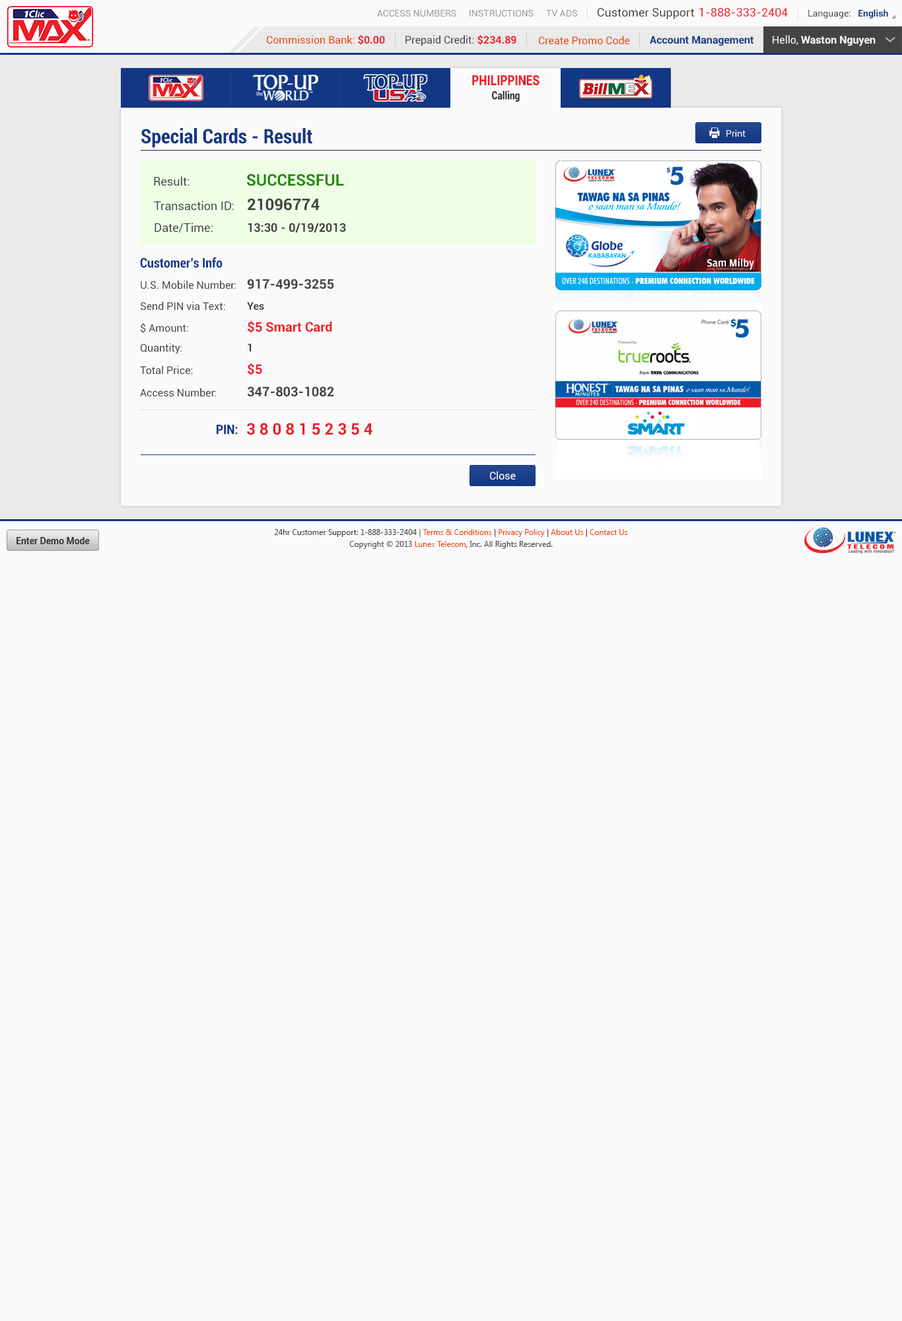
<style>
.page{position:relative;width:902px;height:1321px;background:#fafafa}
.page>*{position:absolute;margin:0}
.t1{font:9.2px "Roboto-Regular";color:#999999}
.t2{font:11.6px "Roboto-Regular";color:#444444}
.t3{font:11.6px "Roboto-Regular";color:#ec2029}
.t4{font:9.2px "Roboto-Regular";color:#444444}
.t5{font:9.2px "Roboto-Bold";color:#123785}
.t6{font:10.6px "Roboto-Regular";color:#ee4400}
.t7{font:10.6px "Roboto-Bold";color:#ec2028}
.t8{font:10.6px "Roboto-Regular";color:#444444}
.t9{font:10.6px "Roboto-Bold";color:#123785}
.t10{font:10.6px "Roboto-Bold";color:#fafafa}
.t11{font:10.6px "Roboto-Regular";color:#fafafa}
.t12{font:14.1px "Roboto-Black";color:#ec2028;scale:0.81 1}
.t13{font:11.3px "Roboto-Black";color:#333333;scale:0.81 1}
.t14{font:19.8px "Roboto-BoldCondensed";color:#123785}
.t15{font:9.2px "Roboto-Regular";color:#fafafa}
.t16{font:15.9px "Roboto-Bold";color:#228800}
.t17{font:11.9px "Roboto-Regular";color:#444444}
.t18{font:15.9px "Roboto-Bold";color:#444444}
.t19{font:11.9px "Roboto-Bold";color:#444444}
.t20{font:13.2px "Roboto-BoldCondensed";color:#123785}
.t21{font:13.2px "Roboto-Bold";color:#444444}
.t22{font:10.6px "Roboto-Bold";color:#444444}
.t23{font:13.2px "Roboto-Bold";color:#ec2028}
.t24{font:15.9px "Roboto-Bold";color:#eb1e27}
.t25{font:10.6px "Roboto-Regular";color:#ffffff}
.t26{font:7.9px/11.9px "SegoeUI";color:#444444}
.t27{font:7.9px/11.9px "SegoeUI";color:#ee4400}
.t28{font:7.9px/11.9px "SegoeUI";color:#333333}
.t29{font:9.2px "Roboto-Bold";color:#333333}
</style>
<div class="page">
<p class="t1" style="left:377px;top:10px;width:80px;height:7px">ACCESS NUMBERS</p>
<p class="t1" style="left:470px;top:10px;width:64px;height:7px">INSTRUCTIONS</p>
<p class="t1" style="left:546px;top:10px;width:31px;height:7px">TV ADS</p>
<p class="t2" style="left:598px;top:8px;width:96px;height:11px">Customer Support</p>
<p class="t3" style="left:700px;top:8px;width:88px;height:9px">1-888-333-2404</p>
<p class="t4" style="left:809px;top:9px;width:80px;height:9px">Language:   <span class="t5">English</span></p>
<p class="t6" style="left:267px;top:35px;width:118px;height:10px">Commission Bank: <span class="t7">$0.00</span></p>
<p class="t8" style="left:406px;top:35px;width:111px;height:11px">Prepaid Credit: <span class="t7">$234.89</span></p>
<p class="t6" style="left:539px;top:36px;width:91px;height:9px">Create Promo Code</p>
<p class="t9" style="left:650px;top:36px;width:104px;height:10px">Account Management</p>
<p class="t10" style="left:773px;top:35px;width:103px;height:11px"><span class="t11">Hello, </span>Waston Nguyen</p>
<p class="t12" style="left:472px;top:75px;width:68px;height:11px">PHILIPPINES</p>
<p class="t13" style="left:492px;top:91px;width:28px;height:11px">Calling</p>
<p class="t14" style="left:141px;top:128px;width:171px;height:20px">Special Cards - Result</p>
<p class="t15" style="left:727px;top:129px;width:19px;height:8px">Print</p>
<p class="t16" style="left:247px;top:174px;width:97px;height:12px">SUCCESSFUL</p>
<p class="t17" style="left:154px;top:176px;width:36px;height:10px">Result:</p>
<p class="t17" style="left:154px;top:201px;width:80px;height:10px">Transaction ID:</p>
<p class="t18" style="left:248px;top:198px;width:72px;height:13px">21096774</p>
<p class="t17" style="left:155px;top:223px;width:58px;height:10px">Date/Time:</p>
<p class="t19" style="left:248px;top:223px;width:98px;height:10px">13:30 - 0/19/2013</p>
<p class="t20" style="left:140px;top:257px;width:83px;height:11px">Customer’s Info</p>
<p class="t8" style="left:141px;top:280px;width:95px;height:9px">U.S. Mobile Number:</p>
<p class="t21" style="left:247px;top:279px;width:87px;height:10px">917-499-3255</p>
<p class="t8" style="left:141px;top:301px;width:84px;height:10px">Send PIN via Text:</p>
<p class="t22" style="left:247px;top:302px;width:17px;height:8px">Yes</p>
<p class="t8" style="left:141px;top:323px;width:47px;height:10px">$ Amount:</p>
<p class="t23" style="left:248px;top:320px;width:84px;height:13px">$5 Smart Card</p>
<p class="t8" style="left:141px;top:343px;width:41px;height:11px">Quantity:</p>
<p class="t22" style="left:248px;top:344px;width:4px;height:7px">1</p>
<p class="t8" style="left:140px;top:365px;width:53px;height:10px">Total Price:</p>
<p class="t23" style="left:248px;top:363px;width:14px;height:12px">$5</p>
<p class="t8" style="left:140px;top:388px;width:76px;height:9px">Access Number:</p>
<p class="t21" style="left:248px;top:386px;width:86px;height:11px">347-803-1082</p>
<p class="t20" style="left:217px;top:425px;width:21px;height:10px">PIN:</p>
<p class="t24" style="left:247px;top:423px;width:126px;height:12px">3 8 0 8 1 5 2 3 5 4</p>
<p class="t25" style="left:490px;top:471px;width:26px;height:9px">Close</p>
<p class="t26" style="left:274px;top:529px;width:354px;height:20px;text-align:center">24hr Customer Support: 1-888-333-2404 | <span class="t27">Terms &amp; Conditions</span><span class="t28"> | </span><span class="t27">Privacy Policy</span><span class="t28"> | </span><span class="t27">About Us</span><span class="t28"> | </span><span class="t27">Contact Us<br></span>Copyright © 2013 <span class="t27">Lunex Telecom</span><span class="t28">,</span> Inc. All Rights Reserved.</p>
<p class="t29" style="left:17px;top:537px;width:73px;height:7px">Enter Demo Mode</p>
</div>
